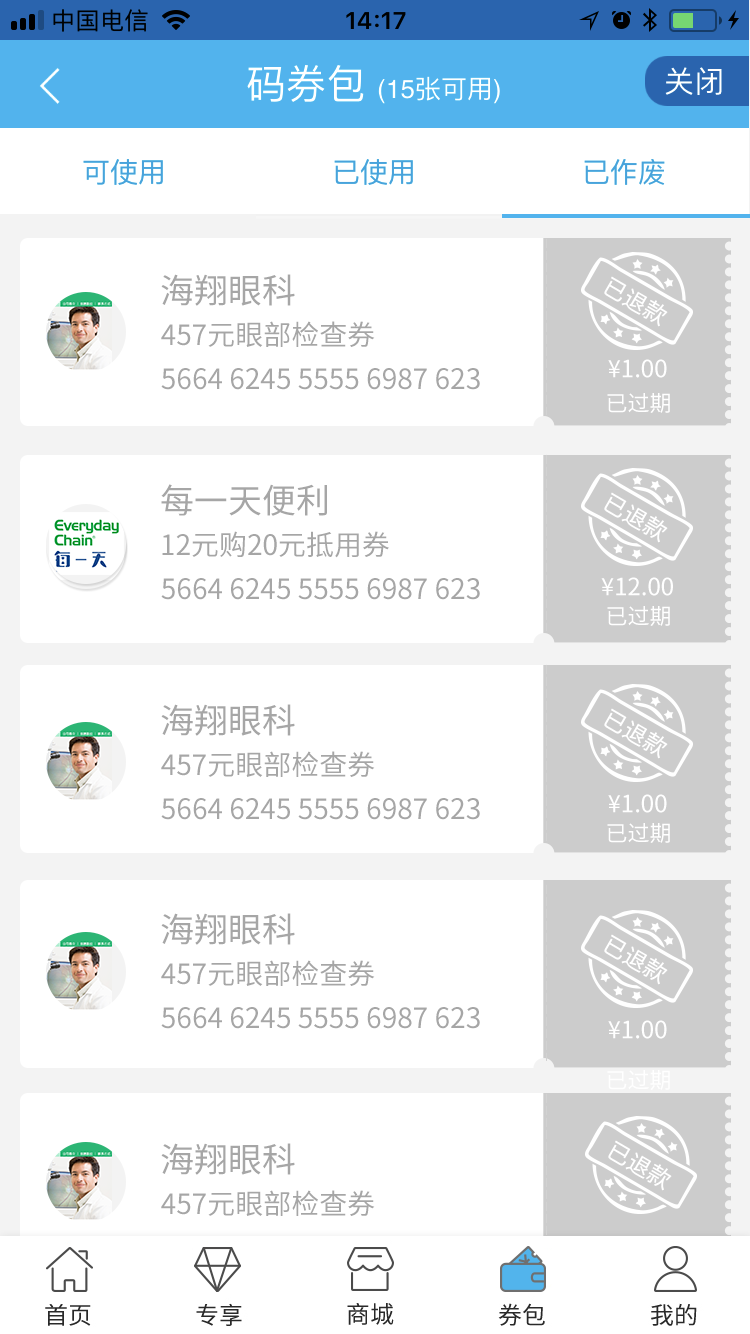
<style>
.page{position:relative;width:750px;height:1334px;background:#ffffff}
.page>*{position:absolute;margin:0}
.t1{font:34px "SourceHanSansCN-Regular";color:#a6a6a6}
.t2{font:28px "SourceHanSansCN-Regular";color:#a6a6a6}
.t3{font:24px "SourceHanSansCN-Regular";color:#ffffff}
.t4{font:22px "SourceHanSansCN-Regular";color:#ffffff}
</style>
<div class="page">
<p class="t1" style="left:161px;top:274px;width:134px;height:32px">海翔眼科</p>
<p class="t2" style="left:161px;top:321px;width:214px;height:26px">457元眼部检查券</p>
<p class="t3" style="left:608px;top:359px;width:59px;height:19px">¥1.00</p>
<p class="t2" style="left:161px;top:368px;width:319px;height:22px">5664 6245 5555 6987 623</p>
<p class="t4" style="left:607px;top:393px;width:63px;height:20px">已过期</p>
<p class="t1" style="left:161px;top:484px;width:166px;height:32px">每一天便利</p>
<p class="t2" style="left:162px;top:531px;width:227px;height:27px">12元购20元抵用券</p>
<p class="t2" style="left:161px;top:578px;width:319px;height:22px">5664 6245 5555 6987 623</p>
<p class="t3" style="left:601px;top:577px;width:72px;height:19px">¥12.00</p>
<p class="t4" style="left:607px;top:606px;width:63px;height:20px">已过期</p>
<p class="t1" style="left:161px;top:704px;width:134px;height:32px">海翔眼科</p>
<p class="t2" style="left:161px;top:751px;width:214px;height:26px">457元眼部检查券</p>
<p class="t2" style="left:161px;top:798px;width:319px;height:22px">5664 6245 5555 6987 623</p>
<p class="t3" style="left:608px;top:794px;width:59px;height:19px">¥1.00</p>
<p class="t4" style="left:607px;top:823px;width:63px;height:20px">已过期</p>
<p class="t1" style="left:161px;top:913px;width:134px;height:32px">海翔眼科</p>
<p class="t2" style="left:161px;top:960px;width:214px;height:26px">457元眼部检查券</p>
<p class="t2" style="left:161px;top:1007px;width:319px;height:22px">5664 6245 5555 6987 623</p>
<p class="t3" style="left:608px;top:1020px;width:59px;height:19px">¥1.00</p>
<p class="t4" style="left:607px;top:1070px;width:63px;height:20px">已过期</p>
<p class="t1" style="left:161px;top:1143px;width:134px;height:32px">海翔眼科</p>
<p class="t2" style="left:161px;top:1190px;width:214px;height:26px">457元眼部检查券</p>
</div>
